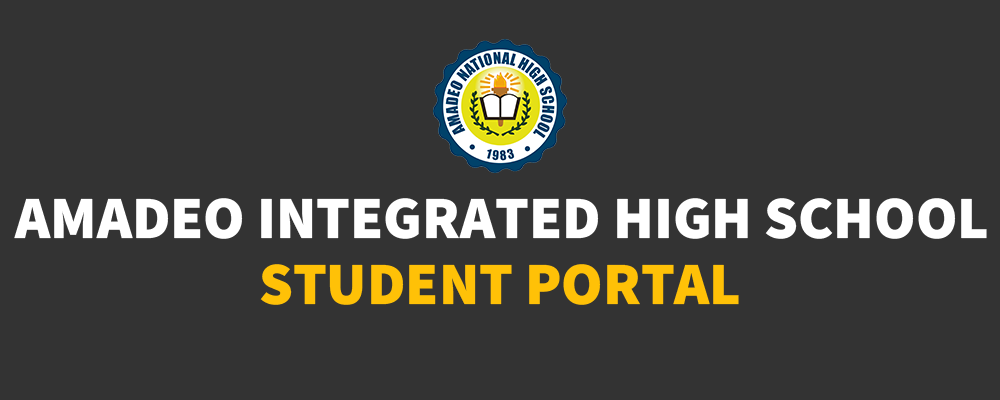
<style>
.page{position:relative;width:1000px;height:400px;background:#333333}
.page>*{position:absolute;margin:0}
.t1{font:60px "SourceSansRoman-Black";color:#ffffff}
.t2{font:60px "SourceSansRoman-Black";color:#ffc107}
</style>
<div class="page">
<p class="t1" style="left:14px;top:198px;width:973px;height:41px">AMADEO INTEGRATED HIGH SCHOOL</p>
<p class="t2" style="left:260px;top:264px;width:479px;height:41px">STUDENT PORTAL</p>
</div>
